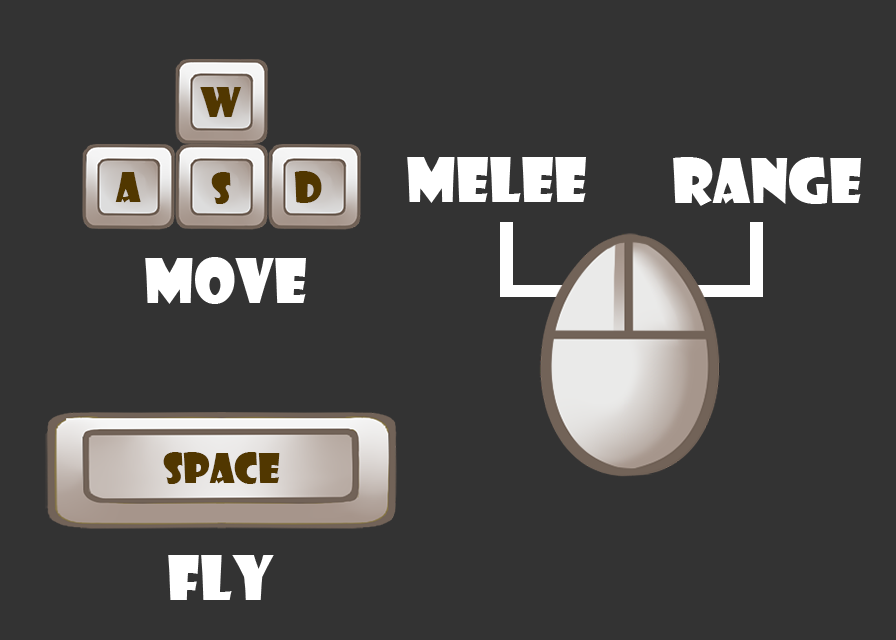
<style>
.page{position:relative;width:896px;height:640px;background:#333333}
.page>*{position:absolute;margin:0}
.t1{font:40px "ShowcardGothic-Reg";color:#513700}
.t2{font:60px "ShowcardGothic-Reg";color:#ffffff}
</style>
<div class="page">
<p class="t1" style="left:200px;top:87px;width:41px;height:30px">w</p>
<p class="t2" style="left:407px;top:157px;width:179px;height:46px">MELEE</p>
<p class="t2" style="left:673px;top:157px;width:188px;height:49px">RANGE</p>
<p class="t1" style="left:115px;top:172px;width:26px;height:31px">a</p>
<p class="t1" style="left:211px;top:172px;width:20px;height:32px">s</p>
<p class="t1" style="left:294px;top:171px;width:28px;height:32px">d</p>
<p class="t2" style="left:145px;top:257px;width:161px;height:47px">MOVE</p>
<p class="t1" style="left:163px;top:452px;width:117px;height:32px">SPACE</p>
<p class="t2" style="left:168px;top:555px;width:106px;height:45px">FLY</p>
</div>
